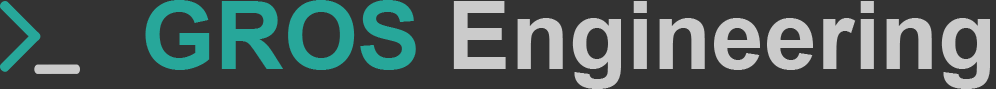
<style>
.page{position:relative;width:996px;height:89px;background:#333333}
.page>*{position:absolute;margin:0}
.t1{font:95px "Arial-BoldMT";color:#cbcbcb}
.t2{font:95px "Arial-BoldMT";color:#27a79a}
</style>
<div class="page">
<p class="t1" style="left:145px;top:0px;width:845px;height:89px"><span class="t2">GROS </span>Engineering</p>
</div>
